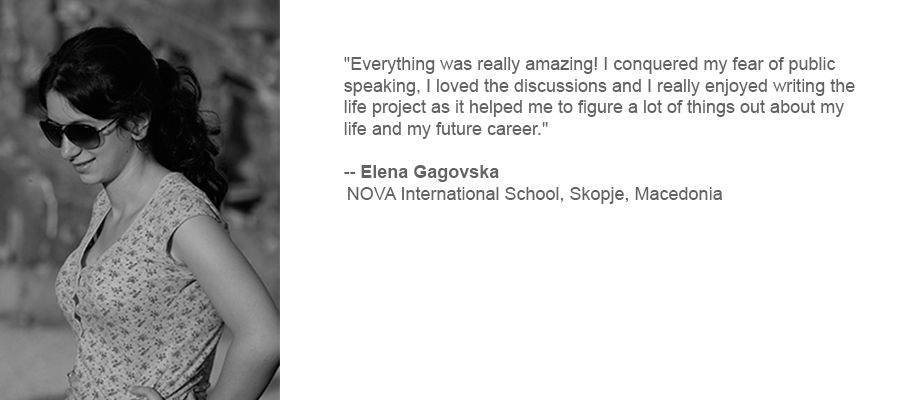
<style>
.page{position:relative;width:900px;height:400px;background:#ffffff}
.page>*{position:absolute;margin:0}
.t1{font:18px "ArialMT";color:#636363}
.t2{font:18px "Arial-BoldMT";color:#636363}
</style>
<div class="page">
<p class="t1" style="left:344px;top:57px;width:511px;height:147px">"Everything was really amazing! I conquered my fear of public speaking, I loved the discussions and I really enjoyed writing the life project as it helped me to figure a lot of things out about my life and my future career."<br><br>-- <span class="t2">Elena Gagovska<br></span>NOVA International School, Skopje, Macedonia</p>
</div>
